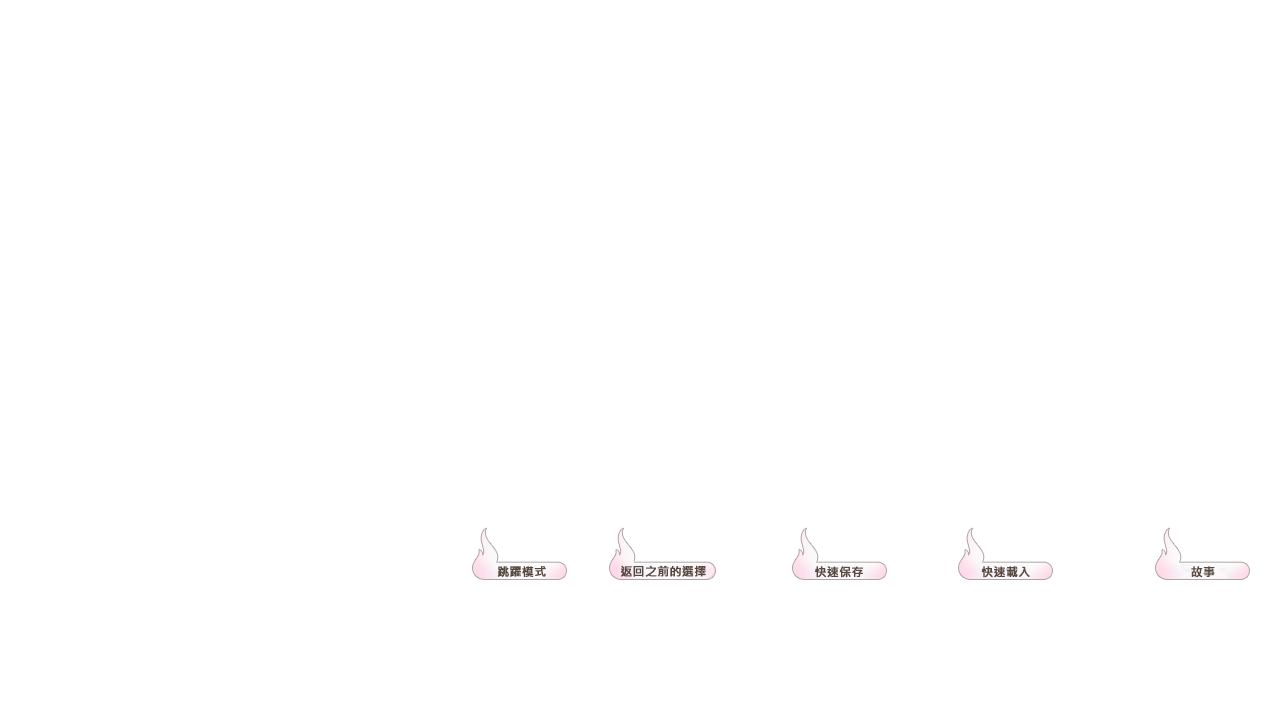
<style>
.page{position:relative;width:1280px;height:720px;background:#ffffff}
.page>*{position:absolute;margin:0}
.t1{font:12px "MicrosoftJhengHeiBold";color:#59493f;font-weight:bold}
</style>
<div class="page">
<p class="t1" style="left:497px;top:566px;width:49px;height:11px">跳躍模式</p>
<p class="t1" style="left:621px;top:565px;width:85px;height:12px">返回之前的選擇</p>
<p class="t1" style="left:815px;top:566px;width:48px;height:12px">快速保存</p>
<p class="t1" style="left:981px;top:566px;width:49px;height:12px">快速載入</p>
<p class="t1" style="left:1191px;top:566px;width:24px;height:12px">故事</p>
</div>
